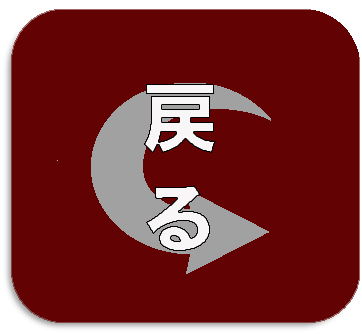
<style>
.page{position:relative;width:362px;height:334px;background:#620202}
.page>*{position:absolute;margin:0}
.t1{font:75px "HiraKakuStdN-W8";color:#f8f6f6}
</style>
<div class="page">
<p class="t1" style="left:144px;top:84px;width:72px;height:167px;text-align:center">戻 る</p>
</div>
